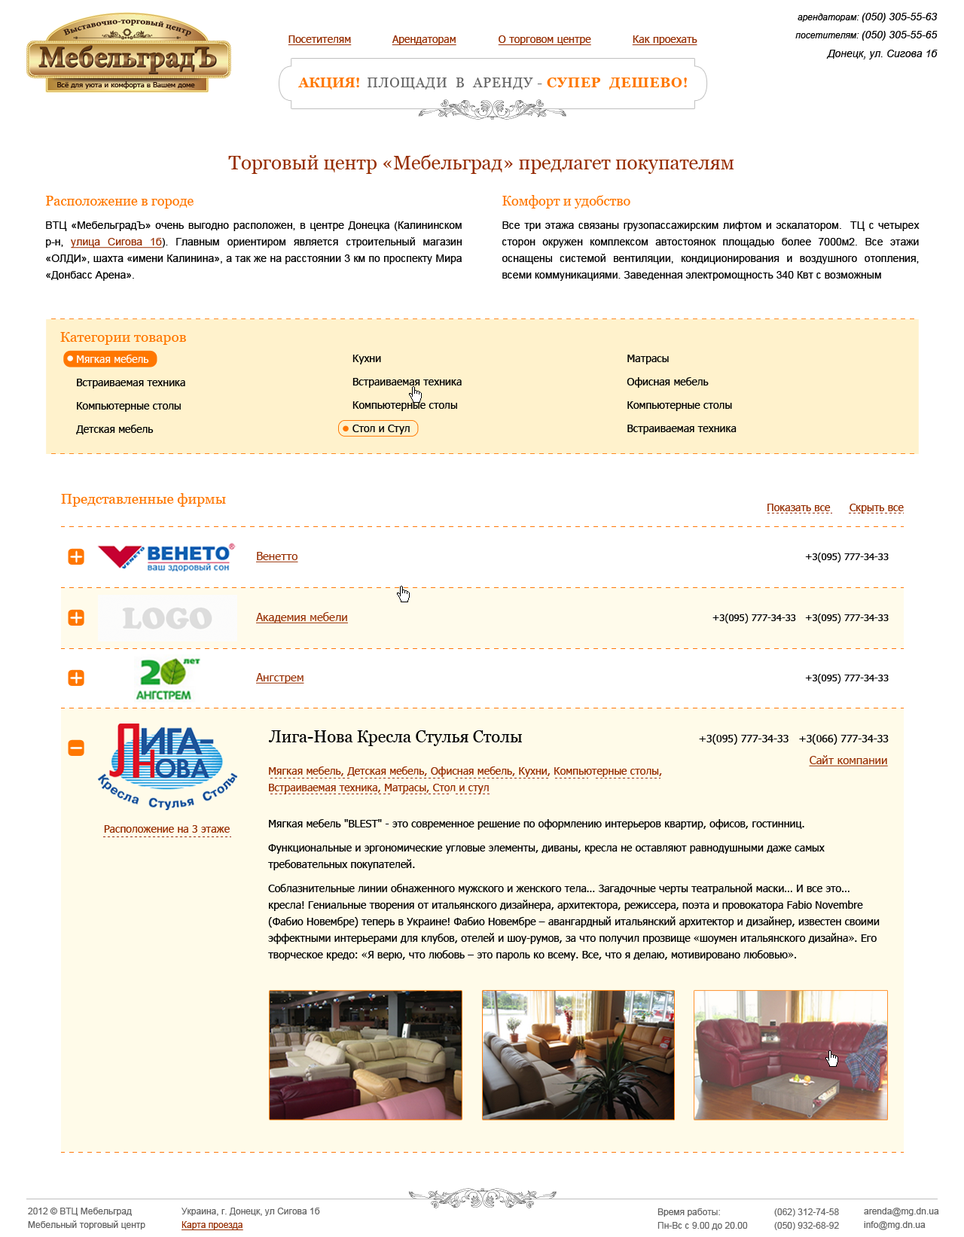
<style>
.page{position:relative;width:964px;height:1237px;background:#ffffff}
.page>*{position:absolute;margin:0}
.t1{font:10.5px "Arial-ItalicMT";color:#000000}
.t2{font:9px "Arial-ItalicMT";color:#000000}
.t3{font:10.5px "Tahoma";color:#962d00;text-decoration:underline}
.t4{font:13.6px "Georgia";letter-spacing:0.05em;color:#646464;text-transform:uppercase}
.t5{font:13.6px "Georgia-Bold";color:#ff7700;text-transform:uppercase}
.t6{font:13.6px "Georgia-Bold";letter-spacing:0.05em;color:#ff7700;text-transform:uppercase}
.t7{font:7.4px "Tahoma";color:#290f04}
.t8{font:19.6px "Georgia";color:#962d00}
.t9{font:10.5px/16.6px "ArialMT";color:#000000}
.t10{font:13.6px/16.6px "Georgia";color:#ff7700}
.t11{font:10.5px/16.6px "ArialMT";color:#962d00;text-decoration:underline}
.t12{font:14.3px "Georgia";color:#ff7700}
.t13{font:10.5px/16.6px "Tahoma";color:#000000}
.t14{font:10.5px/16.6px "Tahoma";color:#ffffff}
.t15{font:10.5px "Tahoma";color:#962d00}
.t16{font:11.3px "Tahoma";color:#962d00;text-decoration:underline}
.t17{font:9.8px "Tahoma";color:#000000}
.t18{font:16.6px "Georgia";color:#000000}
.t19{font:10.5px "Tahoma";color:#000000}
.t20{font:10.5px/16.6px "Tahoma";color:#962d00}
.t21{font:10.5px/16.6px "Tahoma";color:#010101}
.t22{font:9px/6px "ArialMT";color:#646464}
.t23{font:9px/6px "ArialMT";color:#962d00;text-decoration:underline}
</style>
<div class="page">
<p class="t1" style="left:797px;top:13px;width:140px;height:10px"><span class="t2">арендаторам: </span>(050) 305-55-63</p>
<p class="t3" style="left:288px;top:35px;width:64px;height:10px">Посетителям</p>
<p class="t3" style="left:392px;top:35px;width:64px;height:10px">Арендаторам</p>
<p class="t3" style="left:498px;top:35px;width:93px;height:10px">О торговом центре</p>
<p class="t3" style="left:632px;top:35px;width:65px;height:10px">Как проехать</p>
<p class="t1" style="left:795px;top:31px;width:142px;height:10px"><span class="t2">посетителям: </span>(050) 305-55-65</p>
<p class="t1" style="left:826px;top:50px;width:111px;height:9px">Донецк, ул. Сигова 1б</p>
<p class="t4" style="left:298px;top:78px;width:389px;height:12px"><span class="t5">Акция!  </span>Площади  в  аренду - <span class="t6">Супер  дешево!</span></p>
<p class="t7" style="left:57px;top:81px;width:138px;height:8px">Всё для уюта и комфорта в Вашем доме</p>
<p class="t8" style="left:228px;top:154px;width:506px;height:20px">Торговый центр «Мебельград» предлагет покупателям</p>
<p class="t9" style="left:46px;top:196px;width:416px;height:85px;text-align:justify"><span class="t10">Расположение в городе<br></span>ВТЦ «МебельградЪ» очень выгодно расположен, в центре Донецка (Калининском р-н, <span class="t11">улица Сигова 1б</span>). Главным ориентиром является строительный магазин «ОЛДИ», шахта «имени Калинина», а так же на расстоянии 3 км по проспекту Мира «Донбасс Арена».</p>
<p class="t9" style="left:502px;top:195px;width:417px;height:86px;text-align:justify"><span class="t10">Комфорт и удобство<br></span>Все три этажа связаны грузопассажирским лифтом и эскалатором.  ТЦ с четырех сторон окружен комплексом автостоянок площадью более 7000м2. Все этажи оснащены системой вентиляции, кондиционирования и воздушного отопления, всеми коммуникациями. Заведенная электромощность 340 Квт с возможным</p>
<p class="t12" style="left:60px;top:332px;width:126px;height:13px">Категории товаров</p>
<p class="t13" style="left:76px;top:355px;width:109px;height:79px"><span class="t14">Мягкая мебель<br></span>Встраиваемая техника<br>Компьютерные столы<br>Детская мебель</p>
<p class="t13" style="left:352px;top:355px;width:110px;height:79px">Кухни<br>Встраиваемая техника<br>Компьютерные столы<br>Стол и Стул</p>
<p class="t13" style="left:626px;top:355px;width:110px;height:79px">Матрасы<br>Офисная мебель<br>Компьютерные столы<br>Встраиваемая техника</p>
<p class="t12" style="left:61px;top:493px;width:165px;height:14px">Представленные фирмы</p>
<p class="t15" style="left:767px;top:504px;width:64px;height:7px">Показать все</p>
<p class="t15" style="left:849px;top:504px;width:55px;height:10px">Скрыть все</p>
<p class="t16" style="left:256px;top:552px;width:42px;height:10px">Венетто</p>
<p class="t17" style="left:805px;top:553px;width:84px;height:9px">+3(095) 777-34-33</p>
<p class="t16" style="left:256px;top:612px;width:92px;height:11px">Академия мебели</p>
<p class="t17" style="left:712px;top:614px;width:177px;height:9px">+3(095) 777-34-33   +3(095) 777-34-33</p>
<p class="t16" style="left:256px;top:673px;width:48px;height:11px">Ангстрем</p>
<p class="t17" style="left:805px;top:674px;width:84px;height:10px">+3(095) 777-34-33</p>
<p class="t18" style="left:268px;top:730px;width:254px;height:16px">Лига-Нова Кресла Стулья Столы</p>
<p class="t19" style="left:699px;top:734px;width:190px;height:11px">+3(095) 777-34-33   +3(066) 777-34-33</p>
<p class="t16" style="left:809px;top:755px;width:79px;height:12px">Сайт компании</p>
<p class="t20" style="left:269px;top:767px;width:393px;height:27px">Мягкая мебель, Детская мебель, Офисная мебель, Кухни, Компьютерные столы, Встраиваемая техника, Матрасы, Стол и стул</p>
<p class="t21" style="left:268px;top:819px;width:612px;height:142px">Мягкая мебель "BLEST" - это современное решение по оформлению интерьеров квартир, офисов, гостинниц.<br>Функциональные и эргономические угловые элементы, диваны, кресла не оставляют равнодушными даже самых требовательных покупателей.<br>Соблазнительные линии обнаженного мужского и женского тела… Загадочные черты театральной маски… И все это… кресла! Гениальные творения от итальянского дизайнера, архитектора, режиссера, поэта и провокатора Fabio Novembre (Фабио Новембре) теперь в Украине! Фабио Новембре – авангардный итальянский архитектор и дизайнер, известен своими эффектными интерьерами для клубов, отелей и шоу-румов, за что получил прозвище «шоумен итальянского дизайна». Его творческое кредо: «Я верю, что любовь – это пароль ко всему. Все, что я делаю, мотивировано любовью».</p>
<p class="t15" style="left:104px;top:825px;width:126px;height:8px">Расположение на 3 этаже</p>
<p class="t22" style="left:28px;top:1208px;width:117px;height:22px">2012 © ВТЦ Мебельград  <br>Мебельный торговый центр</p>
<p class="t22" style="left:181px;top:1208px;width:139px;height:22px">Украина, г. Донецк, ул Сигова 1б<br><span class="t23">Карта проезда</span></p>
<p class="t22" style="left:657px;top:1209px;width:91px;height:21px">Время работы:<br>Пн-Вс с 9.00 до 20.00</p>
<p class="t22" style="left:774px;top:1209px;width:65px;height:21px">(062) 312-74-58 <br>(050) 932-68-92</p>
<p class="t22" style="left:864px;top:1208px;width:75px;height:22px">arenda@mg.dn.ua<br>info@mg.dn.ua</p>
</div>
